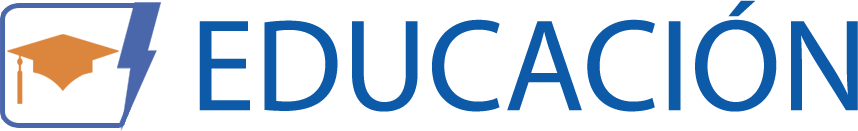
<style>
.page{position:relative;width:858px;height:131px;background:#ffffff}
.page>*{position:absolute;margin:0}
.t1{font:131.5px "MyriadPro-Regular";color:#0d5aa9}
</style>
<div class="page">
<p class="t1" style="left:199px;top:0px;width:659px;height:112px">EDUCACIÓN</p>
</div>
